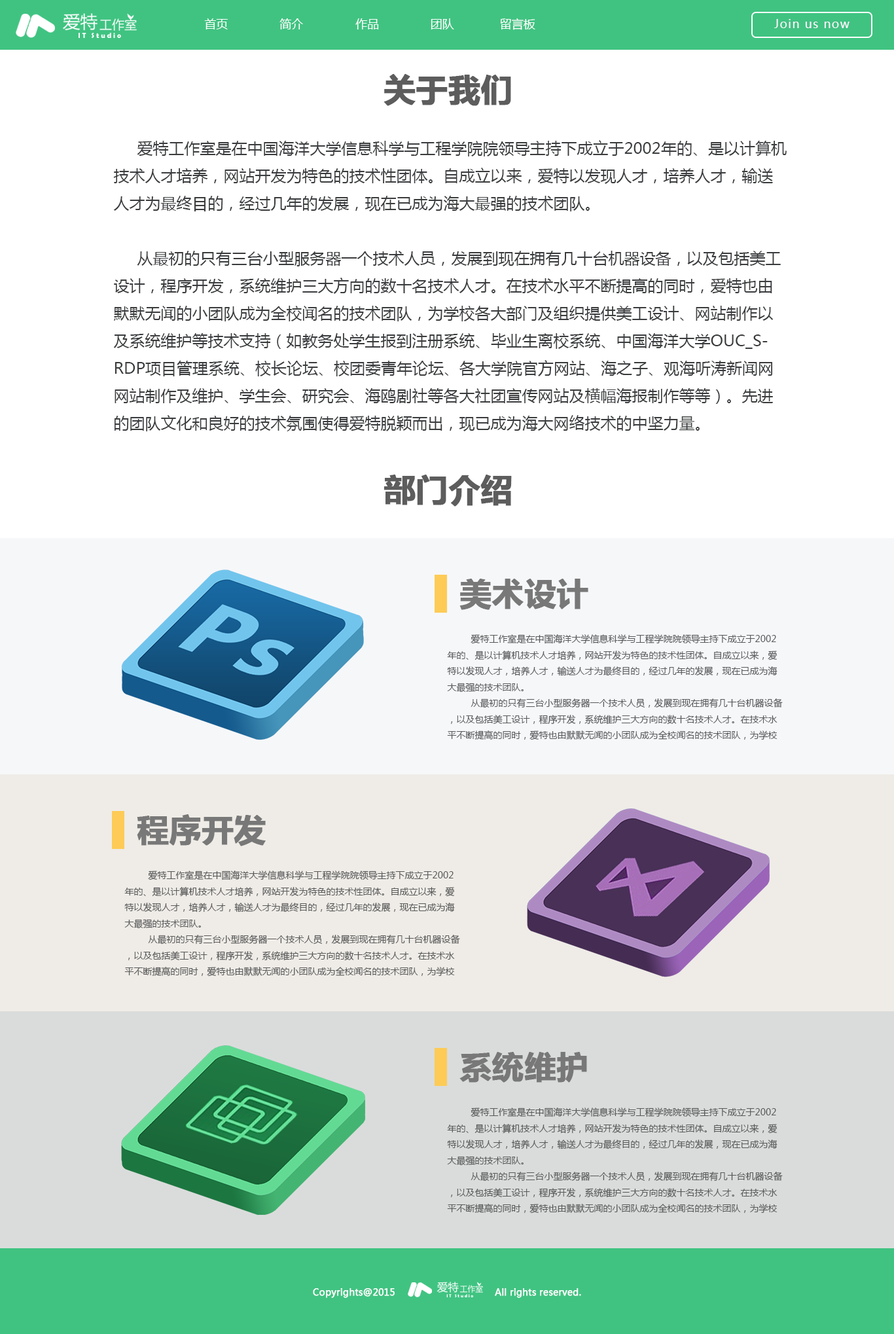
<style>
.page{position:relative;width:894px;height:1334px;background:#ffffff}
.page>*{position:absolute;margin:0}
.t1{font:11.8px "MicrosoftYaHei";color:#ffffff}
.t2{font:11.8px "MicrosoftYaHei";letter-spacing:0.075em;color:#fff4ff}
.t3{font:7.3px "BerlinSansFBDemi-Bold";color:#ffffff}
.t4{font:31.4px "MicrosoftYaHei-Bold";color:#5d5d5e;font-weight:bold}
.t5{font:15.7px "MicrosoftYaHei";color:#393b3d}
.t6{font:31.4px "MicrosoftYaHei-Bold";color:#787878;font-weight:bold}
.t7{font:9.2px "MicrosoftYaHei";color:#575859}
.t8{font:9.2px "MicrosoftYaHei";color:#ffffff;font-weight:bold}
.t9{font:4.6px "BerlinSansFBDemi-Bold";color:#ffffff}
</style>
<div class="page">
<p class="t1" style="left:204px;top:18px;width:24px;height:11px">首页</p>
<p class="t1" style="left:279px;top:18px;width:24px;height:11px">简介</p>
<p class="t1" style="left:355px;top:18px;width:24px;height:11px">作品</p>
<p class="t1" style="left:431px;top:18px;width:23px;height:11px">团队</p>
<p class="t1" style="left:500px;top:18px;width:35px;height:12px">留言板</p>
<p class="t2" style="left:774px;top:19px;width:76px;height:9px">Join us now</p>
<p class="t3" style="left:79px;top:33px;width:42px;height:5px">I T   S t u d i o</p>
<p class="t4" style="left:384px;top:74px;width:127px;height:32px">关于我们</p>
<p class="t5" style="left:113px;top:140px;width:674px;height:291px">爱特工作室是在中国海洋大学信息科学与工程学院院领导主持下成立于2002年的、是以计算机技术人才培养，网站开发为特色的技术性团体。自成立以来，爱特以发现人才，培养人才，输送人才为最终目的，经过几年的发展，现在已成为海大最强的技术团队。<br><br> 从最初的只有三台小型服务器一个技术人员，发展到现在拥有几十台机器设备，以及包括美工设计，程序开发，系统维护三大方向的数十名技术人才。在技术水平不断提高的同时，爱特也由默默无闻的小团队成为全校闻名的技术团队，为学校各大部门及组织提供美工设计、网站制作以及系统维护等技术支持（如教务处学生报到注册系统、毕业生离校系统、中国海洋大学OUC_SRDP项目管理系统、校长论坛、校团委青年论坛、各大学院官方网站、海之子、观海听涛新闻网网站制作及维护、学生会、研究会、海鸥剧社等各大社团宣传网站及横幅海报制作等等）。先进的团队文化和良好的技术氛围使得爱特脱颖而出，现已成为海大网络技术的中坚力量。</p>
<p class="t4" style="left:384px;top:474px;width:128px;height:33px">部门介绍</p>
<p class="t6" style="left:459px;top:579px;width:129px;height:31px">美术设计</p>
<p class="t7" style="left:447px;top:634px;width:336px;height:106px">爱特工作室是在中国海洋大学信息科学与工程学院院领导主持下成立于2002年的、是以计算机技术人才培养，网站开发为特色的技术性团体。自成立以来，爱特以发现人才，培养人才，输送人才为最终目的，经过几年的发展，现在已成为海大最强的技术团队。<br> 从最初的只有三台小型服务器一个技术人员，发展到现在拥有几十台机器设备，以及包括美工设计，程序开发，系统维护三大方向的数十名技术人才。在技术水平不断提高的同时，爱特也由默默无闻的小团队成为全校闻名的技术团队，为学校各大部门及组织提供美工设计、网站制作以及系统维护等技术支持（如教务处学生报到注册系统、毕业生离校系统、中国海洋大学OUC_SRDP项目管理系统、校长论坛、校团委青年论坛、各大学院官方网站、海之子、观海听涛新闻网网站制作及维护、学生会、研究会、海鸥剧社等各大社团宣传网站及横幅海报制作等等）。先进的团队文化和良好的技术氛围使得爱特脱颖而出，现已成为海大网络技术的中坚力量。</p>
<p class="t6" style="left:137px;top:814px;width:129px;height:32px">程序开发</p>
<p class="t7" style="left:124px;top:870px;width:336px;height:106px">爱特工作室是在中国海洋大学信息科学与工程学院院领导主持下成立于2002年的、是以计算机技术人才培养，网站开发为特色的技术性团体。自成立以来，爱特以发现人才，培养人才，输送人才为最终目的，经过几年的发展，现在已成为海大最强的技术团队。<br> 从最初的只有三台小型服务器一个技术人员，发展到现在拥有几十台机器设备，以及包括美工设计，程序开发，系统维护三大方向的数十名技术人才。在技术水平不断提高的同时，爱特也由默默无闻的小团队成为全校闻名的技术团队，为学校各大部门及组织提供美工设计、网站制作以及系统维护等技术支持（如教务处学生报到注册系统、毕业生离校系统、中国海洋大学OUC_SRDP项目管理系统、校长论坛、校团委青年论坛、各大学院官方网站、海之子、观海听涛新闻网网站制作及维护、学生会、研究会、海鸥剧社等各大社团宣传网站及横幅海报制作等等）。先进的团队文化和良好的技术氛围使得爱特脱颖而出，现已成为海大网络技术的中坚力量。</p>
<p class="t6" style="left:459px;top:1052px;width:128px;height:30px">系统维护</p>
<p class="t7" style="left:447px;top:1107px;width:336px;height:106px">爱特工作室是在中国海洋大学信息科学与工程学院院领导主持下成立于2002年的、是以计算机技术人才培养，网站开发为特色的技术性团体。自成立以来，爱特以发现人才，培养人才，输送人才为最终目的，经过几年的发展，现在已成为海大最强的技术团队。<br> 从最初的只有三台小型服务器一个技术人员，发展到现在拥有几十台机器设备，以及包括美工设计，程序开发，系统维护三大方向的数十名技术人才。在技术水平不断提高的同时，爱特也由默默无闻的小团队成为全校闻名的技术团队，为学校各大部门及组织提供美工设计、网站制作以及系统维护等技术支持（如教务处学生报到注册系统、毕业生离校系统、中国海洋大学OUC_SRDP项目管理系统、校长论坛、校团委青年论坛、各大学院官方网站、海之子、观海听涛新闻网网站制作及维护、学生会、研究会、海鸥剧社等各大社团宣传网站及横幅海报制作等等）。先进的团队文化和良好的技术氛围使得爱特脱颖而出，现已成为海大网络技术的中坚力量。</p>
<p class="t8" style="left:313px;top:1288px;width:82px;height:10px">Copyrights@2015</p>
<p class="t8" style="left:495px;top:1288px;width:86px;height:10px">All rights reserved.</p>
<p class="t9" style="left:446px;top:1294px;width:27px;height:3px">I T   S t u d i o</p>
</div>
